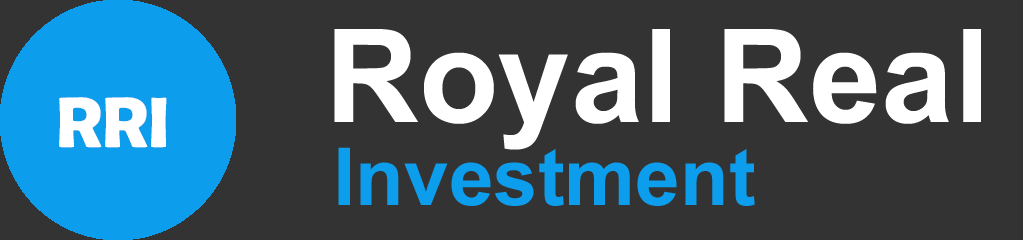
<style>
.page{position:relative;width:1023px;height:240px;background:#333333}
.page>*{position:absolute;margin:0}
.t1{font:130px "Arial-BoldMT";color:#ffffff}
.t2{font:72px "BerlinSansFBDemi-Bold";color:#ffffff}
.t3{font:80px "Arial-BoldMT";color:#0c9eed}
.t4{font:80px "Arial-BoldMT";color:#ffffff}
</style>
<div class="page">
<p class="t1" style="left:334px;top:29px;width:647px;height:121px">Royal Real</p>
<p class="t2" style="left:59px;top:97px;width:108px;height:51px">RRI</p>
<p class="t3" style="left:338px;top:147px;width:417px;height:59px"><span class="t4"> <br></span>Investment</p>
</div>
